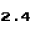
<style>
.page{position:relative;width:32px;height:32px;background:#ffffff}
.page>*{position:absolute;margin:0}
.t1{font:10px "PressStartK";color:#000000}
</style>
<div class="page">
<p class="t1" style="left:1px;top:12px;width:29px;height:9px">2.4</p>
</div>
